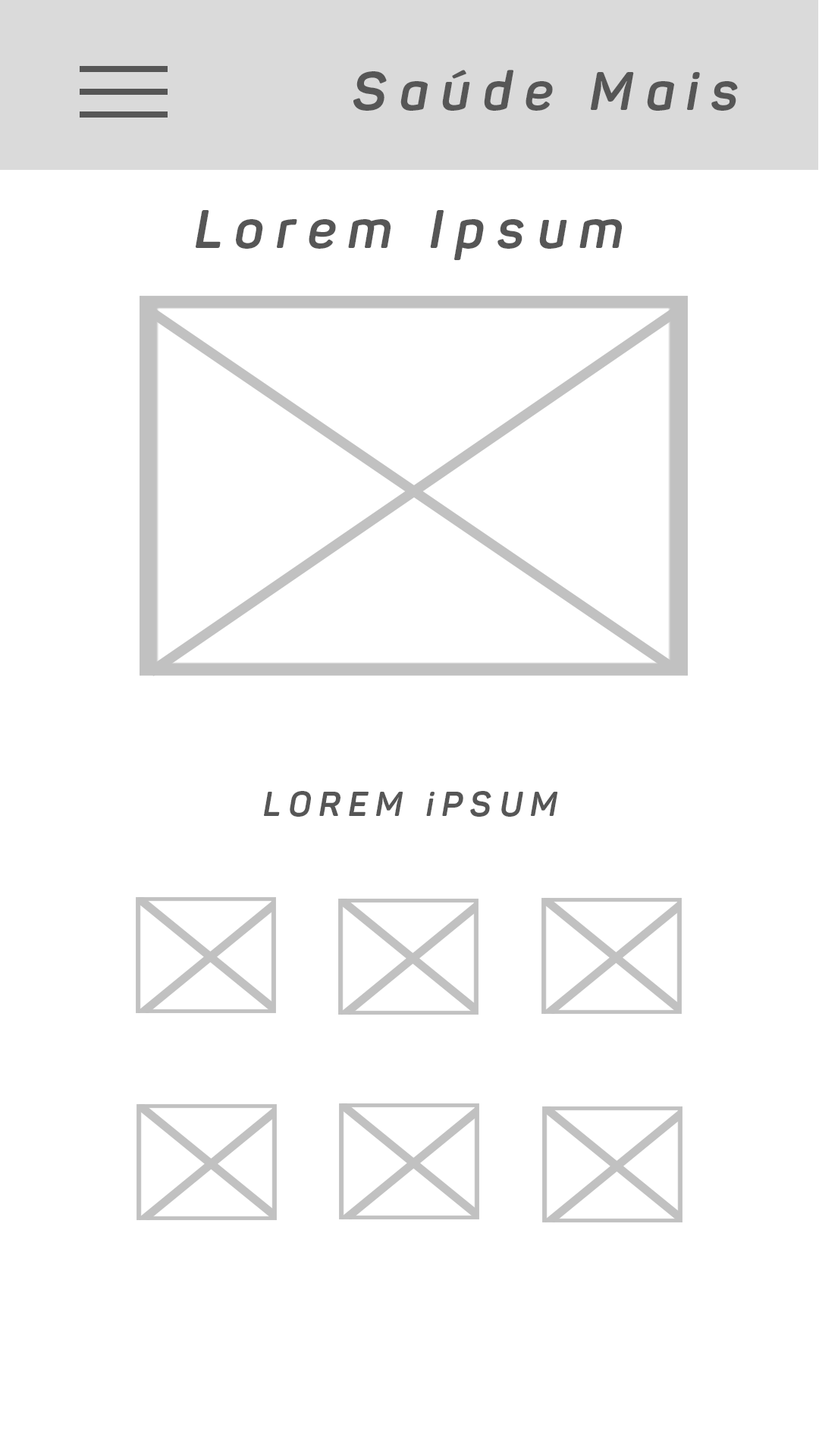
<style>
.page{position:relative;width:819px;height:1456px;background:#ffffff}
.page>*{position:absolute;margin:0}
.t1{font:53.9px "Panton-BoldItalic";letter-spacing:0.23em;color:#565656}
.t2{font:33.7px "Panton-BoldItalic";letter-spacing:0.23em;color:#565656}
</style>
<div class="page">
<p class="t1" style="left:353px;top:70px;width:385px;height:41px">Saúde Mais</p>
<p class="t1" style="left:196px;top:210px;width:426px;height:50px">Lorem Ipsum</p>
<p class="t2" style="left:264px;top:791px;width:294px;height:26px">LOREM iPSUM</p>
</div>
